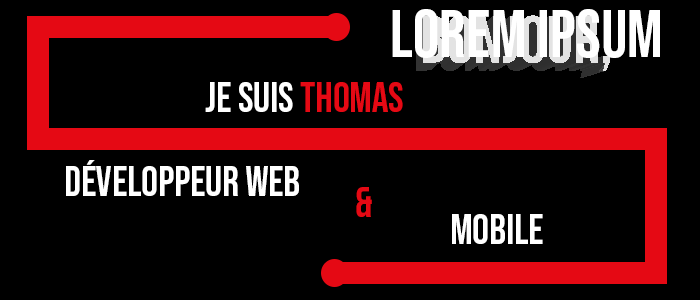
<style>
.page{position:relative;width:700px;height:300px;background:#000000}
.page>*{position:absolute;margin:0}
.t1{font:66.7px "BebasNeue-Regular";color:#ffffff}
.t2{font:41.7px "BebasNeue-Regular";color:#ffffff}
.t3{font:41.7px "BebasNeue-Regular";color:#e50914}
</style>
<div class="page">
<p class="t1" style="left:392px;top:9px;width:268px;height:49px">Lorem Ipsum</p>
<p class="t2" style="left:205px;top:82px;width:198px;height:30px">je suis <span class="t3">thomas</span></p>
<p class="t2" style="left:66px;top:160px;width:233px;height:36px">développeur web</p>
<p class="t3" style="left:356px;top:187px;width:16px;height:30px">&amp;</p>
<p class="t2" style="left:452px;top:214px;width:91px;height:30px">mobile</p>
</div>
